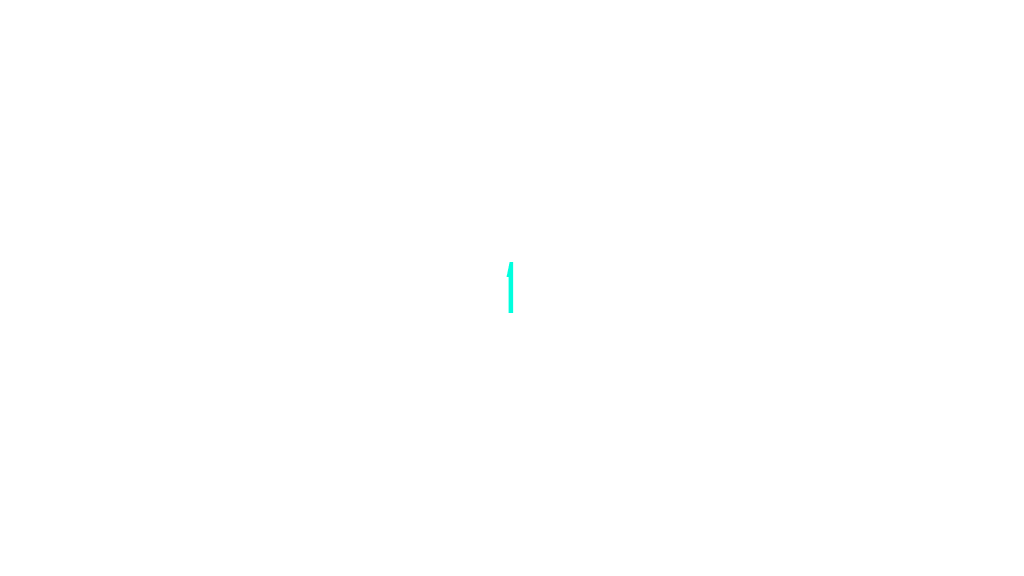
<style>
.page{position:relative;width:1024px;height:576px;background:#ffffff}
.page>*{position:absolute;margin:0}
.t1{font:66.7px "AgencyFB-Reg";color:#00ffde}
</style>
<div class="page">
<p class="t1" style="left:506px;top:262px;width:8px;height:51px">1</p>
</div>
